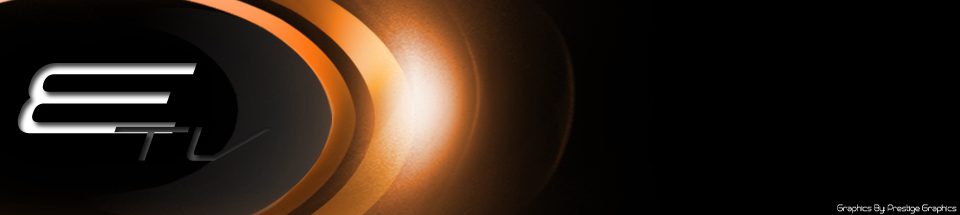
<style>
.page{position:relative;width:960px;height:215px;background:#000000}
.page>*{position:absolute;margin:0}
.t1{font:231.6px "NeutronicaDNA"}
.t2{font:110.4px "NeutronicaDNA";color:#262626}
.t3{font:8px "Neogrey";letter-spacing:0.02em;color:#ffffff;scale:0.82 1}
</style>
<div class="page">
<p class="t1" style="left:17px;top:63px;width:180px;height:71px">E</p>
<p class="t2" style="left:114px;top:126px;width:160px;height:35px">TV</p>
<p class="t3" style="left:837px;top:204px;width:120px;height:10px">Graphics By: Prestige Graphics</p>
</div>
